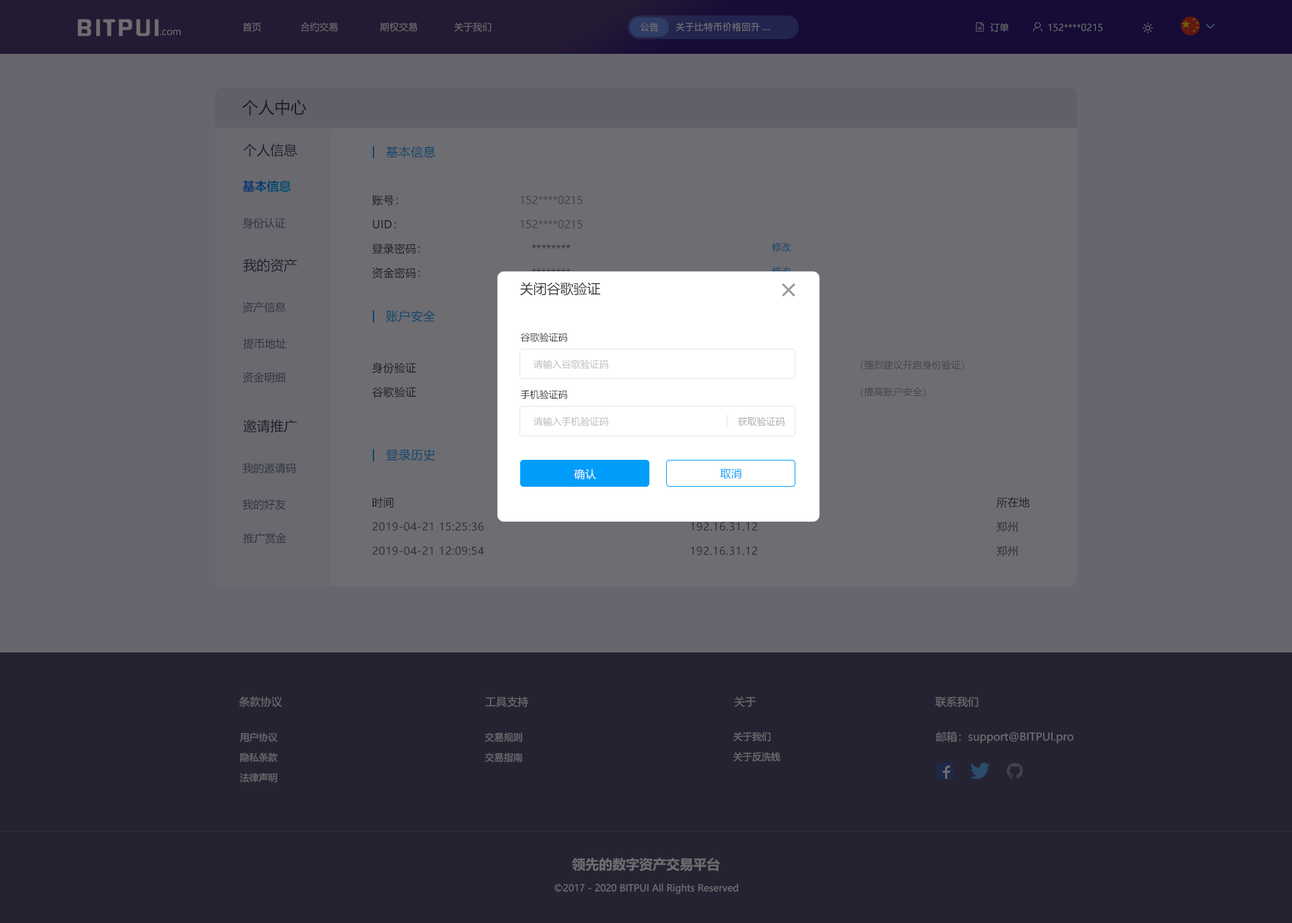
<style>
.page{position:relative;width:1292px;height:923px;background:#67666e}
.page>*{position:absolute;margin:0}
.t1{font:20.6px "FZHZGBJW--GB1-0";letter-spacing:0.1em;color:#6e6d71;scale:1.14 1}
.t2{font:9.4px "MicrosoftYaHei";color:#6e6d71}
.t3{font:9.4px "PingFang-SC-Bold";color:#6e6d71}
.t4{font:16.2px "MicrosoftYaHei";color:#333333}
.t5{font:13.5px "MicrosoftYaHei";color:#1b1f27}
.t6{font:12.1px "MicrosoftYaHei";letter-spacing:0.03em;color:#08466f}
.t7{font:12.1px "MicrosoftYaHei-Bold";color:#084571}
.t8{font:10.8px/24.2px "MicrosoftYaHei";letter-spacing:0.03em;color:#333333}
.t9{font:10.8px/24.2px "MicrosoftYaHei";color:#454448}
.t10{font:10.8px "MicrosoftYaHei";color:#2f353f}
.t11{font:13.5px "MicrosoftYaHei";color:#333333}
.t12{font:28.7px "MicrosoftYaHei";letter-spacing:0.03em;color:#999999}
.t13{font:9.4px "MicrosoftYaHei";color:#333333}
.t14{font:9.4px "MicrosoftYaHei";color:#bbbbbb}
.t15{font:9.4px/26.9px "MicrosoftYaHei";letter-spacing:0.025em;color:#454448}
.t16{font:9.4px "MicrosoftYaHei";color:#aaaaaa}
.t17{font:10.8px "MicrosoftYaHei";letter-spacing:0.03em;color:#ffffff}
.t18{font:10.8px "MicrosoftYaHei";letter-spacing:0.03em;color:#009dfa}
.t19{font:10.8px/24.2px "MicrosoftYaHei";letter-spacing:0.03em;color:#666666}
.t20{font:10.8px "MicrosoftYaHei";color:#6e6d71}
.t21{font:9.4px/20.2px "MicrosoftYaHei";color:#6e6d71}
.t22{font:13.5px "MicrosoftYaHei-Bold";color:#6e6d71}
</style>
<div class="page">
<p class="t1" style="left:77px;top:19px;width:82px;height:17px">BITPUI</p>
<p class="t2" style="left:160px;top:30px;width:21px;height:6px">.com</p>
<p class="t2" style="left:243px;top:22px;width:248px;height:10px">首页              合约交易               期权交易             关于我们</p>
<p class="t3" style="left:640px;top:22px;width:19px;height:10px">公告</p>
<p class="t3" style="left:676px;top:22px;width:94px;height:10px">关于比特币价格回升...</p>
<p class="t2" style="left:990px;top:23px;width:19px;height:9px">订单</p>
<p class="t2" style="left:1049px;top:24px;width:54px;height:8px">152****0215</p>
<p class="t4" style="left:242px;top:100px;width:65px;height:16px">个人中心</p>
<p class="t5" style="left:243px;top:143px;width:54px;height:14px">个人信息</p>
<p class="t6" style="left:386px;top:146px;width:49px;height:12px">基本信息</p>
<p class="t7" style="left:242px;top:180px;width:49px;height:12px">基本信息</p>
<p class="t8" style="left:372px;top:195px;width:48px;height:84px">账号：<br>UID：<br>登录密码：<br>资金密码：</p>
<p class="t9" style="left:520px;top:195px;width:63px;height:78px;text-align:center">152****0215<br>152****0215<br>********<br>********</p>
<p class="t10" style="left:242px;top:217px;width:44px;height:12px">身份认证</p>
<p class="t5" style="left:243px;top:258px;width:54px;height:14px">我的资产</p>
<p class="t11" style="left:520px;top:282px;width:80px;height:13px">关闭谷歌验证</p>
<p class="t12" style="left:782px;top:283px;width:14px;height:14px">×</p>
<p class="t10" style="left:242px;top:302px;width:44px;height:11px">资产信息</p>
<p class="t6" style="left:386px;top:310px;width:49px;height:12px">账户安全</p>
<p class="t10" style="left:243px;top:338px;width:44px;height:11px">提币地址</p>
<p class="t13" style="left:520px;top:332px;width:47px;height:10px">谷歌验证码</p>
<p class="t8" style="left:372px;top:362px;width:45px;height:36px">身份验证<br>谷歌验证</p>
<p class="t14" style="left:533px;top:359px;width:75px;height:10px">请输入谷歌验证码</p>
<p class="t15" style="left:861px;top:360px;width:103px;height:37px">（强烈建议开启身份验证）<br>（提高账户安全）</p>
<p class="t10" style="left:242px;top:372px;width:43px;height:11px">资金明细</p>
<p class="t13" style="left:520px;top:390px;width:47px;height:9px">手机验证码</p>
<p class="t5" style="left:243px;top:419px;width:54px;height:14px">邀请推广</p>
<p class="t14" style="left:533px;top:417px;width:75px;height:9px">请输入手机验证码</p>
<p class="t16" style="left:738px;top:417px;width:47px;height:9px">获取验证码</p>
<p class="t6" style="left:386px;top:449px;width:49px;height:12px">登录历史</p>
<p class="t10" style="left:242px;top:462px;width:54px;height:11px">我的邀请码</p>
<p class="t17" style="left:574px;top:468px;width:22px;height:12px">确认</p>
<p class="t18" style="left:720px;top:468px;width:22px;height:11px">取消</p>
<p class="t19" style="left:372px;top:497px;width:112px;height:58px"><span class="t8">时间<br></span>2019-04-21 15:25:36<br>2019-04-21 12:09:54</p>
<p class="t19" style="left:997px;top:497px;width:33px;height:59px"><span class="t8">所在地<br></span>郑州<br>郑州</p>
<p class="t10" style="left:242px;top:499px;width:44px;height:11px">我的好友</p>
<p class="t10" style="left:243px;top:532px;width:44px;height:12px">推广赏金</p>
<p class="t20" style="left:239px;top:696px;width:43px;height:11px">条款协议</p>
<p class="t20" style="left:485px;top:696px;width:43px;height:11px">工具支持</p>
<p class="t20" style="left:734px;top:696px;width:23px;height:11px">关于</p>
<p class="t20" style="left:936px;top:696px;width:43px;height:11px">联系我们</p>
<p class="t21" style="left:240px;top:732px;width:38px;height:50px;text-align:center">用户协议<br>隐私条款<br>法律声明</p>
<p class="t21" style="left:485px;top:732px;width:38px;height:30px">交易规则<br>交易指南</p>
<p class="t21" style="left:733px;top:732px;width:48px;height:29px">关于我们<br>关于反洗钱</p>
<p class="t20" style="left:936px;top:731px;width:138px;height:13px">邮箱：support@BITPUI.pro</p>
<p class="t22" style="left:572px;top:857px;width:148px;height:14px">领先的数字资产交易平台</p>
<p class="t2" style="left:555px;top:883px;width:183px;height:11px">©2017 - 2020 BITPUI All Rights Reserved</p>
</div>
